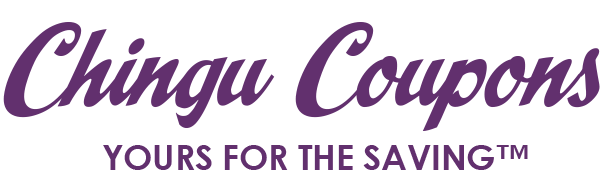
<style>
.page{position:relative;width:612px;height:193px;background:#ffffff}
.page>*{position:absolute;margin:0}
.t1{font:125px "CCSpillsMedium";color:#62306e}
.t2{font:34.6px "CenturyGothic-Bold";color:#62306e}
</style>
<div class="page">
<p class="t1" style="left:3px;top:22px;width:597px;height:109px">Chingu Coupons</p>
<p class="t2" style="left:103px;top:145px;width:425px;height:25px">YOURS FOR THE SAVING™</p>
</div>
